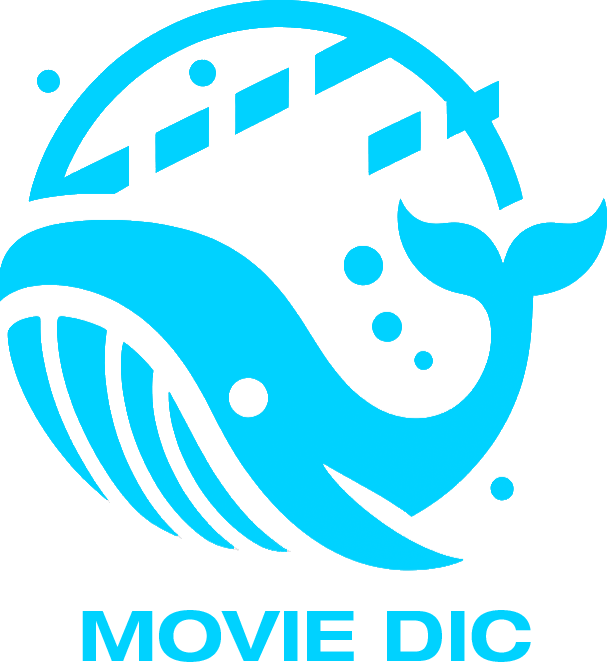
<style>
.page{position:relative;width:607px;height:662px;background:#ffffff}
.page>*{position:absolute;margin:0}
.t1{font:70px "HelveticaNeueLTPro-BdEx";color:#00d2ff}
</style>
<div class="page">
<p class="t1" style="left:82px;top:610px;width:449px;height:52px">MOVIE DIC</p>
</div>
